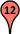
<style>
.page{position:relative;width:20px;height:34px;background:#ffffff}
.page>*{position:absolute;margin:0}
.t1{font:12px "Calibri-Bold";color:#000000}
</style>
<div class="page">
<p class="t1" style="left:4px;top:6px;width:12px;height:8px">12</p>
</div>
